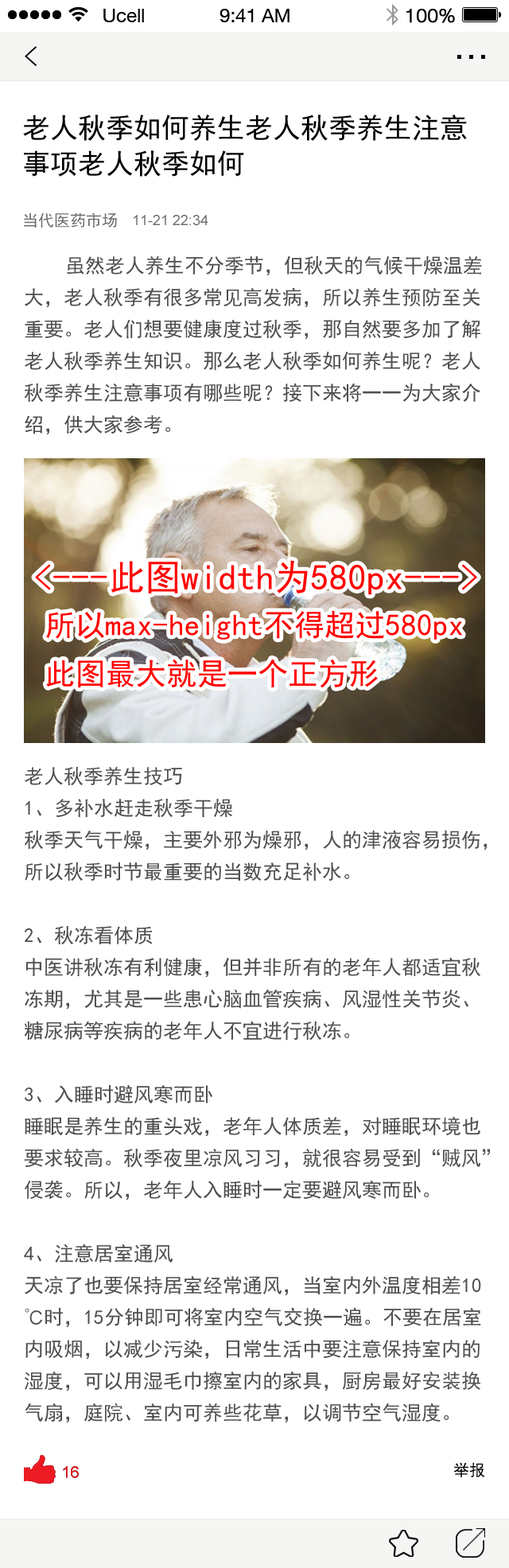
<style>
.page{position:relative;width:509px;height:1568px;background:#ffffff}
.page>*{position:absolute;margin:0}
.t1{font:27.8px "SimHei";color:#000000}
.t2{font:27.8px/35.8px "SimHei";color:#000000}
.t3{font:15.9px "SimHei";color:#6d6d6d}
.t4{font:14.3px "ArialMT";color:#6d6d6d}
.t5{font:19.9px/31.8px "SimHei";color:#4f4f4f}
.t6{font:36px "SimHei";color:#ff0000}
.t7{font:30.4px/48.7px "SimHei";color:#ff0000}
.t8{font:15.9px "ArialMT";color:#ed1b24}
.t9{font:15.9px "SimHei";color:#000000}
</style>
<div class="page">
<p class="t1" style="left:25px;top:46px;width:12px;height:20px">&lt;</p>
<p class="t2" style="left:23px;top:115px;width:444px;height:62px">老人秋季如何养生老人秋季养生注意<br>事项老人秋季如何</p>
<p class="t3" style="left:24px;top:212px;width:93px;height:16px">当代医药市场</p>
<p class="t4" style="left:134px;top:215px;width:74px;height:11px">11-21 22:34</p>
<p class="t5" style="left:25px;top:255px;width:457px;height:180px">虽然老人养生不分季节，但秋天的气候干燥温差<br>大，老人秋季有很多常见高发病，所以养生预防至关<br>重要。老人们想要健康度过秋季，那自然要多加了解<br>老人秋季养生知识。那么老人秋季如何养生呢？老人<br>秋季养生注意事项有哪些呢？接下来将一一为大家介<br>绍，供大家参考。</p>
<p class="t6" style="left:35px;top:560px;width:442px;height:35px">&lt;---此图width为580px---&gt;</p>
<p class="t7" style="left:46px;top:611px;width:416px;height:77px">所以max-height不得超过580px<br>此图最大就是一个正方形</p>
<p class="t5" style="left:24px;top:766px;width:466px;height:657px">老人秋季养生技巧<br>1、多补水赶走秋季干燥<br>秋季天气干燥，主要外邪为燥邪，人的津液容易损伤，<br>所以秋季时节最重要的当数充足补水。<br><br>2、秋冻看体质<br>中医讲秋冻有利健康，但并非所有的老年人都适宜秋<br>冻期，尤其是一些患心脑血管疾病、风湿性关节炎、<br>糖尿病等疾病的老年人不宜进行秋冻。<br><br>3、入睡时避风寒而卧<br>睡眠是养生的重头戏，老年人体质差，对睡眠环境也<br>要求较高。秋季夜里凉风习习，就很容易受到“贼风”<br>侵袭。所以，老年人入睡时一定要避风寒而卧。<br><br>4、注意居室通风<br>天凉了也要保持居室经常通风，当室内外温度相差10<br>℃时，15分钟即可将室内空气交换一遍。不要在居室<br>内吸烟，以减少污染，日常生活中要注意保持室内的<br>湿度，可以用湿毛巾擦室内的家具，厨房最好安装换<br>气扇，庭院、室内可养些花草，以调节空气湿度。</p>
<p class="t8" style="left:63px;top:1466px;width:16px;height:12px">16</p>
<p class="t8" style="left:63px;top:1466px;width:16px;height:12px">16</p>
<p class="t9" style="left:453px;top:1462px;width:32px;height:15px">举报</p>
</div>
